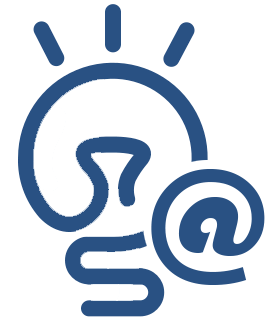
<style>
.page{position:relative;width:280px;height:320px;background:#ffffff}
.page>*{position:absolute;margin:0}
.t1{font:168px "Bauhaus93";color:#295183}
</style>
<div class="page">
<p class="t1" style="left:151px;top:169px;width:114px;height:116px">@</p>
</div>
